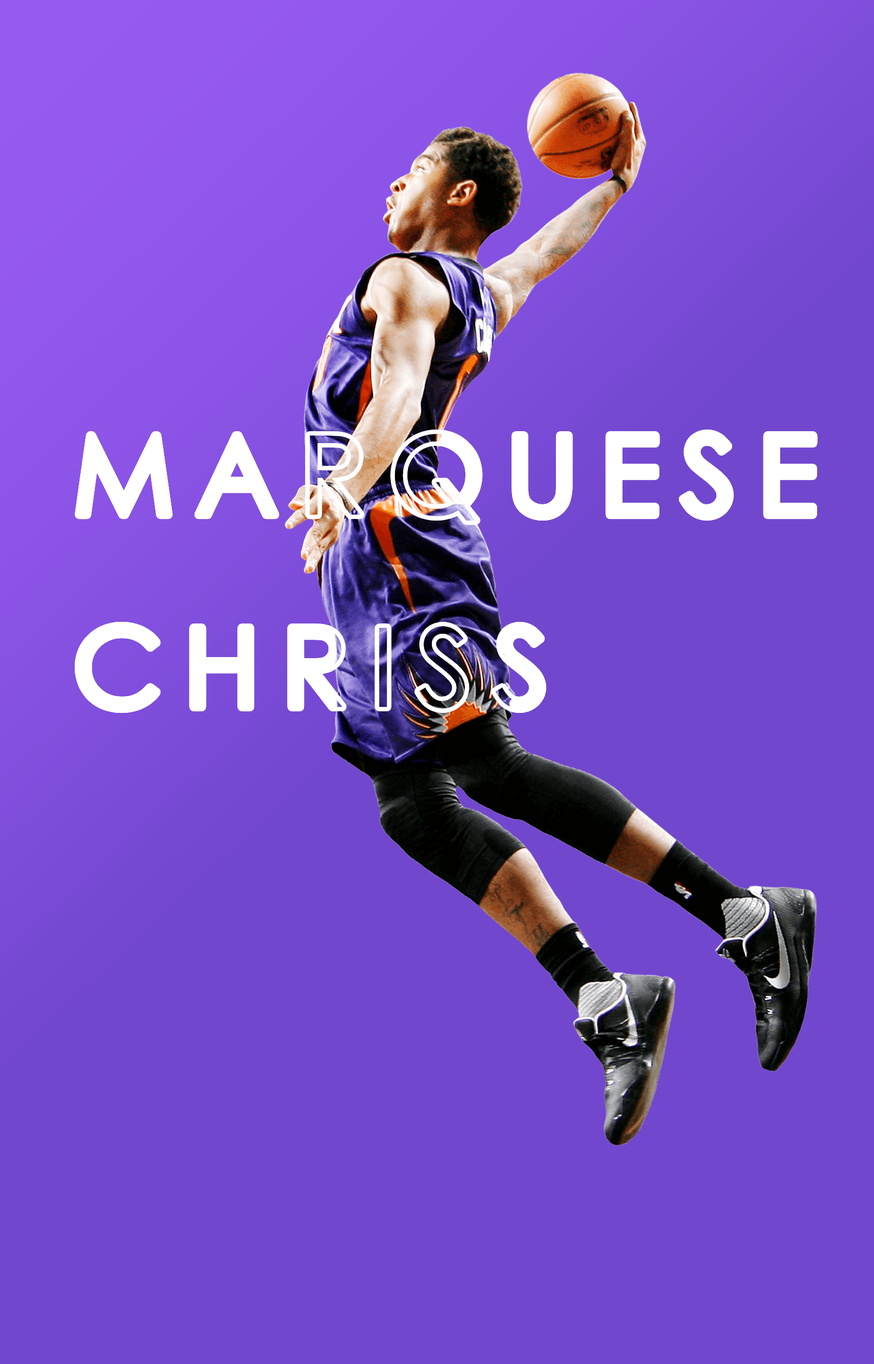
<style>
.page{position:relative;width:874px;height:1364px;background:#7147ce}
.page>*{position:absolute;margin:0}
.t1{font:110.1px "CenturyGothic";letter-spacing:0.2em;color:#ffffff}
</style>
<div class="page">
<p class="t1" style="left:79px;top:434px;width:734px;height:275px">MARQUESE<br>CHRISS</p>
<p class="t1" style="left:79px;top:434px;width:734px;height:275px">MARQUESE<br>CHRISS</p>
</div>
